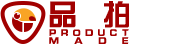
<style>
.page{position:relative;width:185px;height:45px;background:#ffffff}
.page>*{position:absolute;margin:0}
.t1{font:30px "FZZYFW--GB1-0";letter-spacing:0.8em;color:#a10000;text-transform:uppercase}
.t2{font:10px/8px "HYk2gj";color:#a10000;text-transform:uppercase}
</style>
<div class="page">
<p class="t1" style="left:49px;top:1px;width:80px;height:27px">品拍</p>
<p class="t2" style="left:49px;top:29px;width:80px;height:15px;text-align:justify">Product<br>made</p>
</div>
